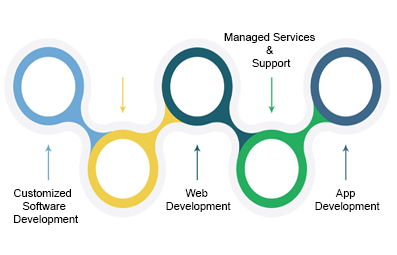
<style>
.page{position:relative;width:397px;height:255px;background:#ffffff}
.page>*{position:absolute;margin:0}
.t1{font:11px "ArialMT";color:#000000}
</style>
<div class="page">
<p class="t1" style="left:224px;top:33px;width:91px;height:36px;text-align:center">Managed Services <br>&amp; <br>Support</p>
<p class="t1" style="left:14px;top:189px;width:64px;height:36px;text-align:center">Customized <br>Software<br> Development</p>
<p class="t1" style="left:166px;top:189px;width:65px;height:23px;text-align:center">Web <br>Development</p>
<p class="t1" style="left:315px;top:189px;width:65px;height:23px;text-align:center">App <br>Development</p>
</div>
